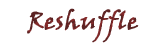
<style>
.page{position:relative;width:165px;height:45px;background:#ffffff}
.page>*{position:absolute;margin:0}
.t1{font:24px "VinerHandITC";color:#652525;font-weight:bold}
</style>
<div class="page">
<p class="t1" style="left:27px;top:8px;width:112px;height:35px">Reshuffle</p>
</div>
